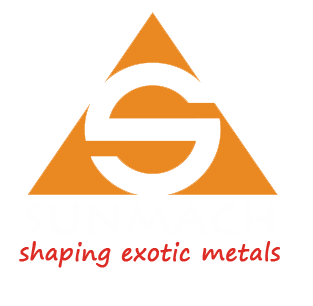
<style>
.page{position:relative;width:313px;height:306px;background:#ffffff}
.page>*{position:absolute;margin:0}
.t1{font:23px "SegoePrint";color:#dc2c25;font-weight:bold}
</style>
<div class="page">
<p class="t1" style="left:19px;top:241px;width:261px;height:27px">shaping exotic metals</p>
</div>
